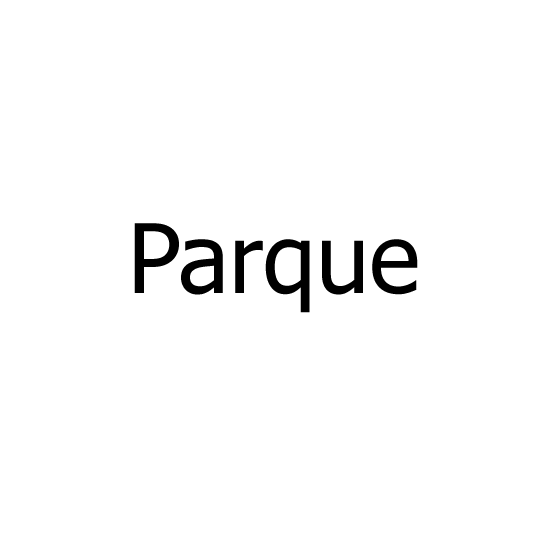
<style>
.page{position:relative;width:543px;height:543px;background:#ffffff}
.page>*{position:absolute;margin:0}
.t1{font:96.1px "Tahoma";color:#000000}
</style>
<div class="page">
<p class="t1" style="left:134px;top:223px;width:284px;height:90px">Parque</p>
</div>
